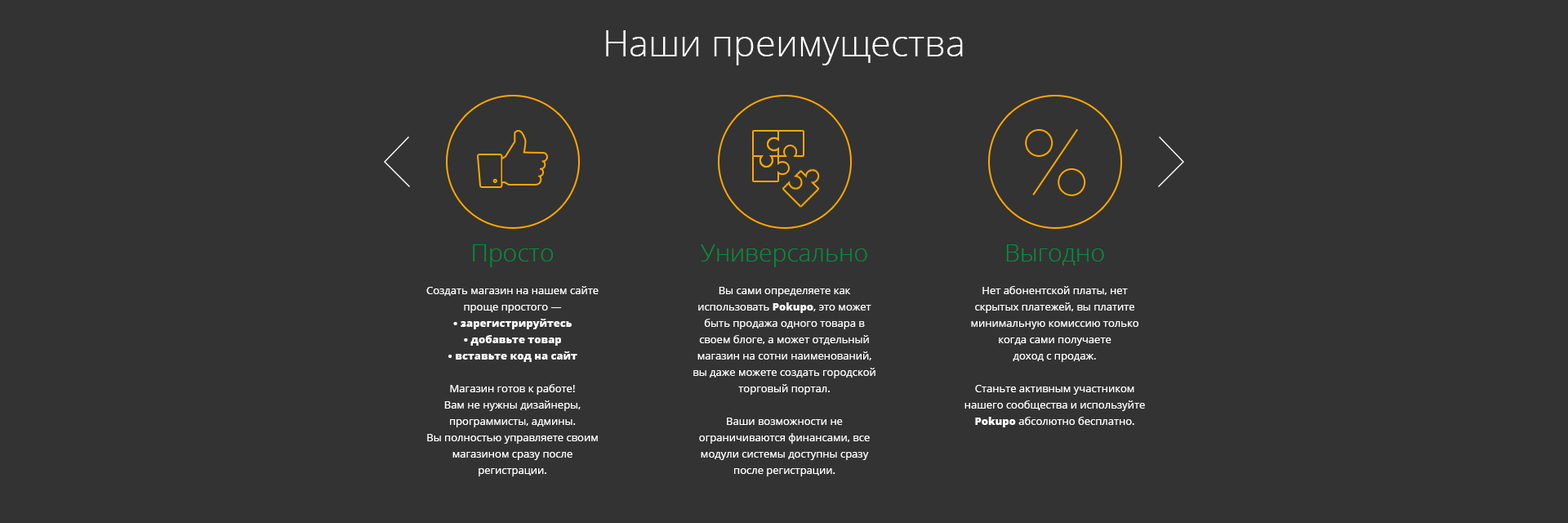
<style>
.page{position:relative;width:1568px;height:523px;background:#333333}
.page>*{position:absolute;margin:0}
.t1{font:36.8px "OpenSans-Light";color:#ffffff}
.t2{font:24.5px "OpenSans-Light";color:#02903d}
.t3{font:10.6px/16.3px "OpenSans";color:#ffffff}
.t4{font:16.3px/16.3px "OpenSans-Extrabold";color:#ffffff}
.t5{font:10.6px/16.3px "OpenSans-Extrabold";color:#ffffff}
</style>
<div class="page">
<p class="t1" style="left:606px;top:30px;width:357px;height:35px">Наши преимущества</p>
<p class="t2" style="left:473px;top:244px;width:80px;height:23px">Просто</p>
<p class="t2" style="left:701px;top:244px;width:166px;height:23px">Универсально</p>
<p class="t2" style="left:1006px;top:244px;width:98px;height:21px">Выгодно</p>
<p class="t3" style="left:426px;top:286px;width:173px;height:190px;text-align:center">Создать магазин на нашем сайте проще простого — <br><span class="t4">·</span><span class="t5"> зарегистрируйтесь<br></span><span class="t4">·</span><span class="t5"> добавьте товар<br></span><span class="t4">·</span><span class="t5"> вставьте код на сайт<br></span><br>Магазин готов к работе!<br>Вам не нужны дизайнеры,<br>программисты, админы.<br>Вы полностью управляете своим магазином сразу после<br>регистрации.</p>
<p class="t3" style="left:693px;top:287px;width:182px;height:189px;text-align:center">Вы сами определяете как использовать <span class="t5">Pokupo</span>, это может<br>быть продажа одного товара в своем блоге, а может отдельный магазин на сотни наименований, вы даже можете создать городской торговый портал.<br><br>Ваши возможности не ограничиваются финансами, все модули системы доступны сразу<br>после регистрации.</p>
<p class="t3" style="left:964px;top:286px;width:181px;height:141px;text-align:center">Нет абонентской платы, нет скрытых платежей, вы платите<br>минимальную комиссию только когда сами получаете<br>доход с продаж.<br><br>Станьте активным участником нашего сообщества и используйте <span class="t5">Pokupo</span> абсолютно бесплатно.</p>
</div>
